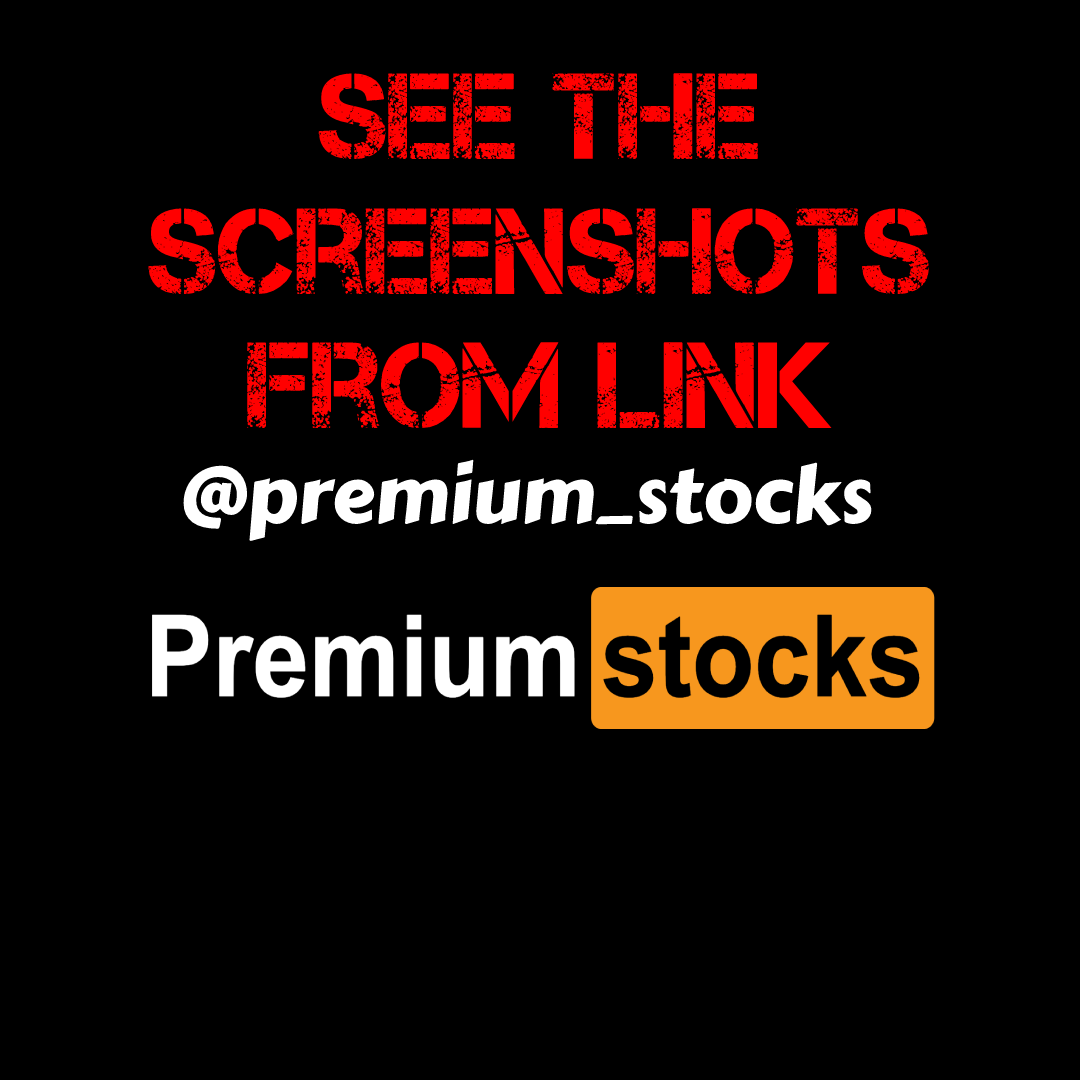
<style>
.page{position:relative;width:1080px;height:1080px;background:#000000}
.page>*{position:absolute;margin:0}
.t1{font:122.1px "Captureit";color:#ff0000;scale:0.96 1}
.t2{font:78px "CarterOne";color:#ffffff}
</style>
<div class="page">
<p class="t1" style="left:148px;top:73px;width:781px;height:356px;text-align:center">See the<br>Screenshots<br>From Link</p>
<p class="t2" style="left:183px;top:459px;width:689px;height:82px">@premium_stocks</p>
</div>
